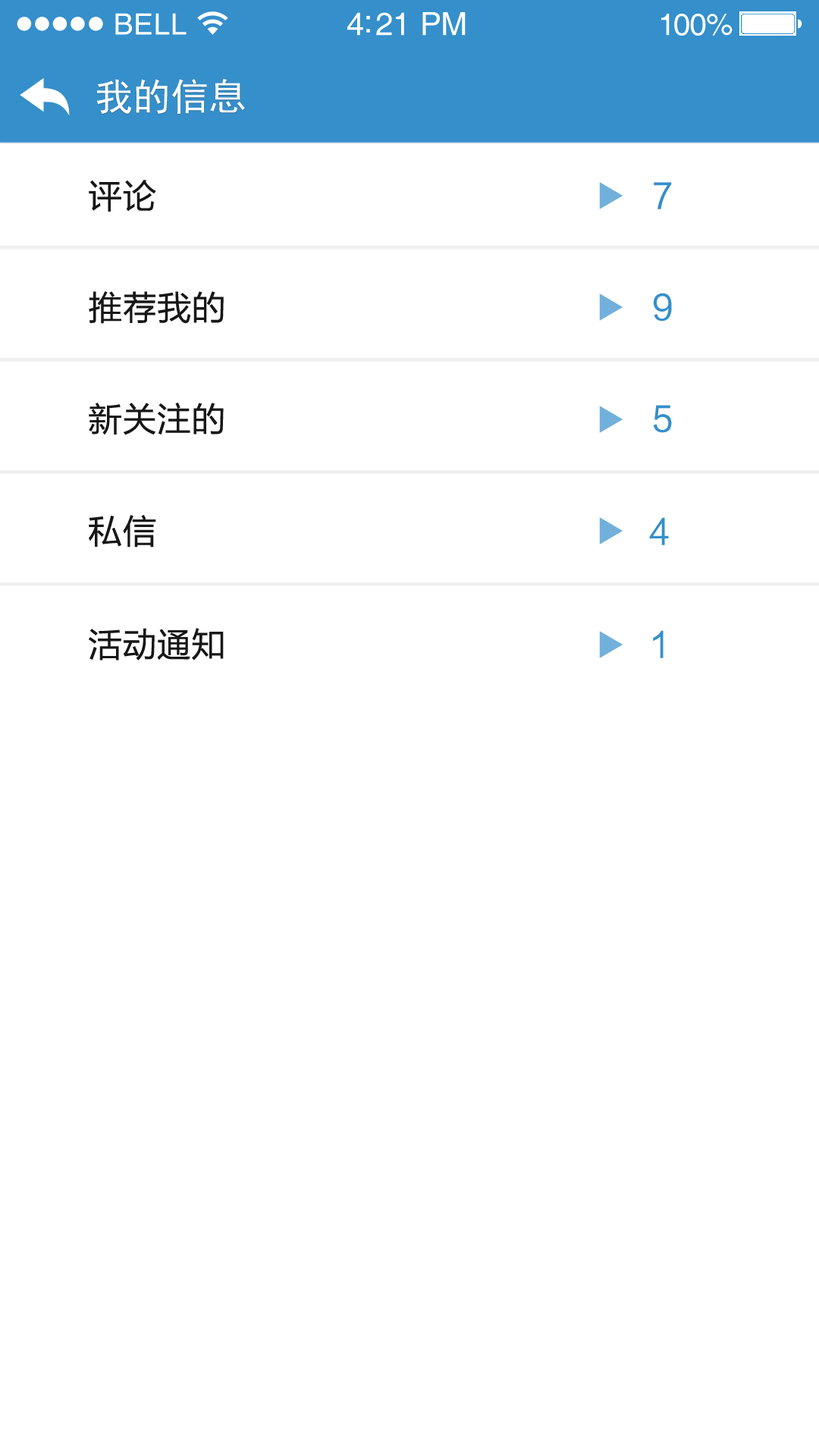
<style>
.page{position:relative;width:819px;height:1456px;background:#ffffff}
.page>*{position:absolute;margin:0}
.t1{font:29.3px "Helvetica";letter-spacing:0.02em;color:#ffffff}
.t2{font:31.8px "Helvetica";letter-spacing:-0.02em;color:#ffffff}
.t3{font:30.6px "Helvetica";letter-spacing:-0.02em;color:#ffffff}
.t4{font:37.9px "SimHei";color:#ffffff}
.t5{font:34.1px "FZLTHJW--GB1-0";letter-spacing:0.01em;color:#171717}
.t6{font:34.1px "FZLTHJW--GB1-0";letter-spacing:0.01em;color:#358fcb}
</style>
<div class="page">
<p class="t1" style="left:115px;top:13px;width:72px;height:22px">BELL</p>
<p class="t2" style="left:347px;top:12px;width:119px;height:24px">4:21 PM</p>
<p class="t3" style="left:661px;top:14px;width:72px;height:22px">100%</p>
<p class="t4" style="left:96px;top:79px;width:149px;height:35px">我的信息</p>
<p class="t5" style="left:89px;top:180px;width:67px;height:32px">评论</p>
<p class="t6" style="left:654px;top:182px;width:18px;height:27px">7</p>
<p class="t5" style="left:89px;top:291px;width:135px;height:33px">推荐我的</p>
<p class="t6" style="left:653px;top:293px;width:19px;height:29px">9</p>
<p class="t5" style="left:89px;top:403px;width:135px;height:32px">新关注的</p>
<p class="t6" style="left:653px;top:405px;width:19px;height:28px">5</p>
<p class="t5" style="left:89px;top:515px;width:67px;height:33px">私信</p>
<p class="t6" style="left:649px;top:517px;width:20px;height:28px">4</p>
<p class="t5" style="left:89px;top:628px;width:135px;height:32px">活动通知</p>
<p class="t6" style="left:653px;top:630px;width:11px;height:28px">1</p>
</div>
